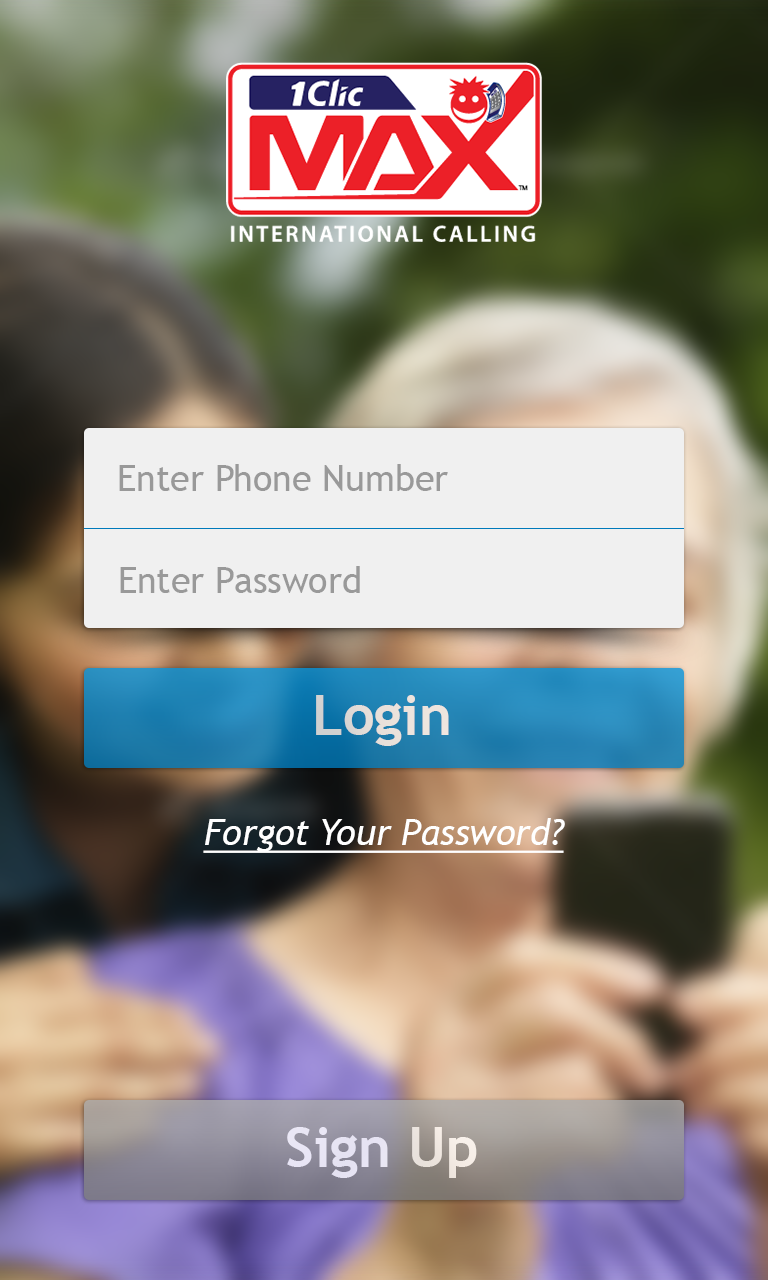
<style>
.page{position:relative;width:768px;height:1280px}
.page>*{position:absolute;margin:0}
.t1{font:36px "TrebuchetMS";color:#999999}
.t2{font:56px "TrebuchetMS-Bold";color:#e9e0da}
.t3{font:36px "TrebuchetMS-Italic";color:#ffffff;text-decoration:underline}
.t4{font:56px "TrebuchetMS-Bold";color:#e9e5f2}
</style>
<div class="page">
<p class="t1" style="left:119px;top:464px;width:329px;height:27px">Enter Phone Number</p>
<p class="t1" style="left:120px;top:566px;width:240px;height:27px">Enter Password</p>
<p class="t2" style="left:316px;top:695px;width:133px;height:51px">Login</p>
<p class="t3" style="left:203px;top:818px;width:362px;height:35px">Forgot Your Password?</p>
<p class="t4" style="left:287px;top:1127px;width:190px;height:51px">Sign Up</p>
</div>
